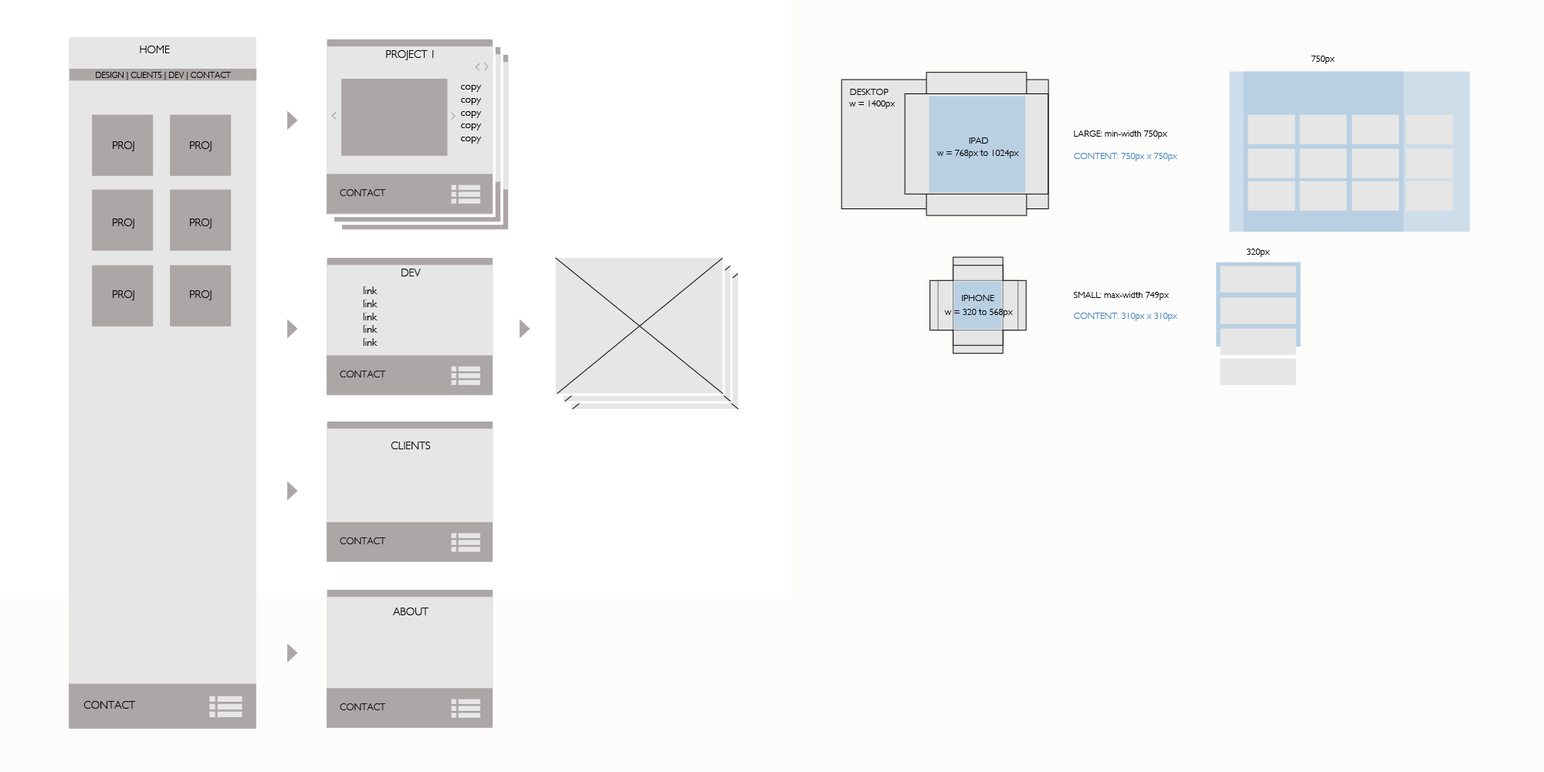
<style>
.page{position:relative;width:1544px;height:772px;background:#fcfcfb}
.page>*{position:absolute;margin:0}
.t1{font:10.8px "GillSans-Light";color:#000000}
.t2{font:9.3px "GillSans-Light";color:#000000}
.t3{font:8.5px "GillSans-Light";color:#000000}
.t4{font:9.3px "GillSans-Light";color:#3f82b9}
</style>
<div class="page">
<p class="t1" style="left:140px;top:46px;width:30px;height:7px">HOME</p>
<p class="t1" style="left:386px;top:50px;width:48px;height:10px">PROJECT 1</p>
<p class="t2" style="left:1311px;top:56px;width:24px;height:8px">750px</p>
<p class="t3" style="left:96px;top:72px;width:136px;height:8px">DESIGN | CLIENTS | DEV | CONTACT</p>
<p class="t1" style="left:461px;top:85px;width:21px;height:59px;text-align:center">copy<br>copy<br>copy<br>copy<br>copy</p>
<p class="t2" style="left:850px;top:89px;width:39px;height:6px">DESKTOP</p>
<p class="t2" style="left:849px;top:100px;width:47px;height:9px">w = 1400px</p>
<p class="t2" style="left:969px;top:137px;width:19px;height:7px">IPAD</p>
<p class="t2" style="left:1074px;top:130px;width:93px;height:9px">LARGE: min-width 750px</p>
<p class="t1" style="left:113px;top:141px;width:21px;height:10px">PROJ</p>
<p class="t1" style="left:190px;top:141px;width:22px;height:10px">PROJ</p>
<p class="t2" style="left:937px;top:150px;width:82px;height:8px">w = 768px to 1024px</p>
<p class="t4" style="left:1074px;top:153px;width:104px;height:8px">CONTENT: 750px x 750px</p>
<p class="t1" style="left:113px;top:219px;width:21px;height:10px">PROJ</p>
<p class="t1" style="left:190px;top:219px;width:22px;height:10px">PROJ</p>
<p class="t2" style="left:1247px;top:249px;width:23px;height:8px">320px</p>
<p class="t1" style="left:402px;top:269px;width:19px;height:7px">DEV</p>
<p class="t1" style="left:113px;top:290px;width:21px;height:10px">PROJ</p>
<p class="t1" style="left:190px;top:290px;width:22px;height:10px">PROJ</p>
<p class="t1" style="left:363px;top:286px;width:15px;height:60px;text-align:center">link<br>link<br>link<br>link<br>link</p>
<p class="t2" style="left:1073px;top:292px;width:96px;height:8px">SMALL: max-width 749px</p>
<p class="t2" style="left:962px;top:295px;width:33px;height:6px">IPHONE</p>
<p class="t2" style="left:944px;top:309px;width:69px;height:8px">w = 320 to 568px</p>
<p class="t4" style="left:1074px;top:313px;width:104px;height:8px">CONTENT: 310px x 310px</p>
<p class="t1" style="left:391px;top:442px;width:40px;height:7px">CLIENTS</p>
<p class="t1" style="left:393px;top:608px;width:36px;height:7px">ABOUT</p>
</div>
